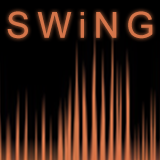
<style>
.page{position:relative;width:160px;height:160px;background:#000000}
.page>*{position:absolute;margin:0}
.t1{font:36px "ArialMT";letter-spacing:-0.04em;color:#d5754a}
</style>
<div class="page">
<p class="t1" style="left:7px;top:11px;width:146px;height:28px">S W i N G</p>
</div>
